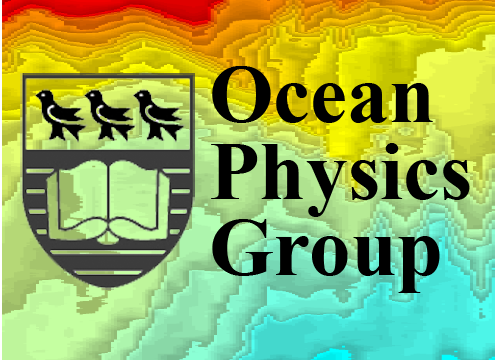
<style>
.page{position:relative;width:495px;height:361px}
.page>*{position:absolute;margin:0}
.t1{font:83.3px/76.4px "TimesNewRomanPS-BoldMT";color:#000000}
</style>
<div class="page">
<p class="t1" style="left:211px;top:66px;width:259px;height:227px">Ocean<br>Physics<br>Group</p>
</div>
